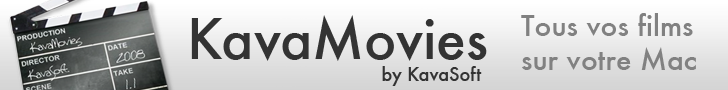
<style>
.page{position:relative;width:728px;height:90px}
.page>*{position:absolute;margin:0}
.t1{font:18px "Futura-Medium";color:#333333}
.t2{font:54px "Futura-Medium";color:#333333}
.t3{font:28px "Futura-Medium";color:#818181}
</style>
<div class="page">
<p class="t1" style="left:191px;top:15px;width:296px;height:71px"><span class="t2">KavaMovies<br></span>                                   by KavaSoft</p>
<p class="t3" style="left:521px;top:13px;width:175px;height:57px">Tous vos films<br>sur votre Mac</p>
</div>
